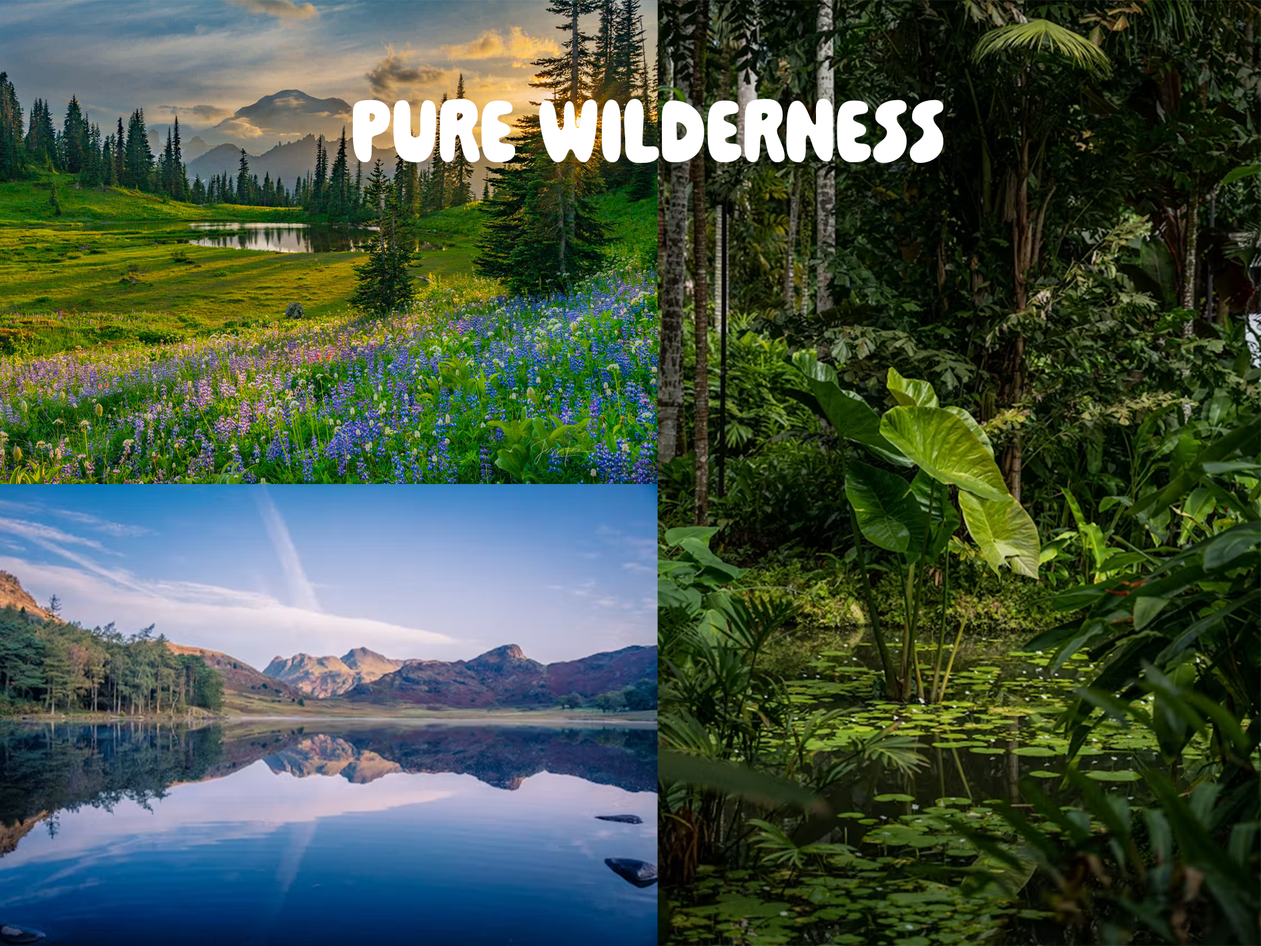
<style>
.page{position:relative;width:1261px;height:946px}
.page>*{position:absolute;margin:0}
.t1{font:100.1px "PaindeMie-Regular";color:#ffffff}
</style>
<div class="page">
<p class="t1" style="left:352px;top:98px;width:592px;height:65px">PURE WILDERNESS</p>
</div>
